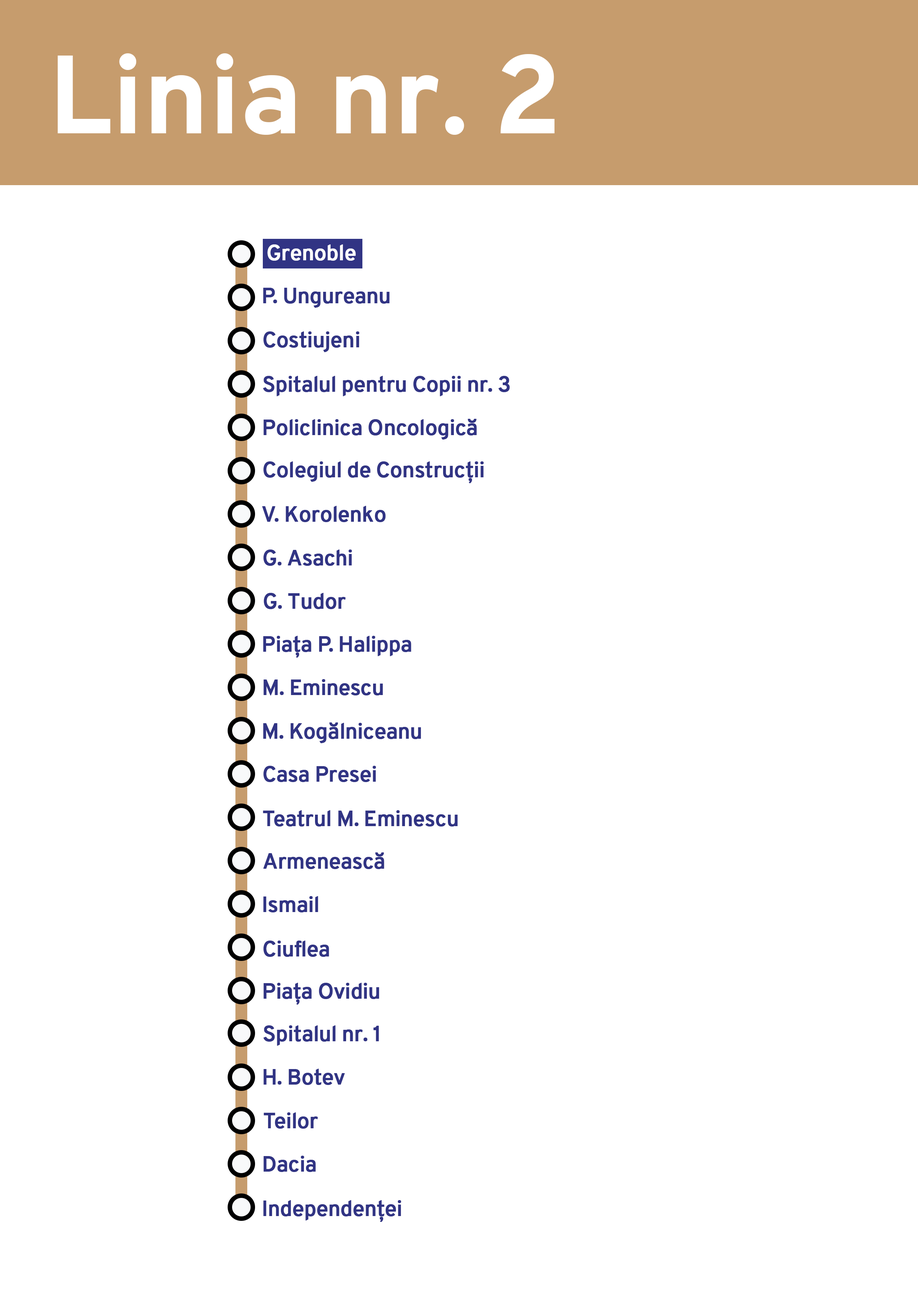
<style>
.page{position:relative;width:918px;height:1299px;background:#ffffff}
.page>*{position:absolute;margin:0}
.t1{font:111.1px "Overpass-Bold";color:#ffffff}
.t2{font:21.6px "Overpass-Reg";letter-spacing:-0.025em;color:#ffffff;font-weight:bold}
.t3{font:21.6px "Overpass-Reg";letter-spacing:-0.025em;color:#313484;font-weight:bold}
</style>
<div class="page">
<p class="t1" style="left:57px;top:53px;width:498px;height:82px">Linia nr. 2</p>
<p class="t2" style="left:267px;top:244px;width:89px;height:17px">Grenoble</p>
<p class="t3" style="left:263px;top:288px;width:127px;height:20px">P. Ungureanu</p>
<p class="t3" style="left:263px;top:331px;width:96px;height:21px">Costiujeni</p>
<p class="t3" style="left:263px;top:376px;width:247px;height:20px">Spitalul pentru Copii nr. 3</p>
<p class="t3" style="left:264px;top:419px;width:213px;height:20px">Policlinica Oncologică</p>
<p class="t3" style="left:263px;top:461px;width:221px;height:22px">Colegiul de Construcții</p>
<p class="t3" style="left:262px;top:506px;width:124px;height:16px">V. Korolenko</p>
<p class="t3" style="left:263px;top:549px;width:89px;height:17px">G. Asachi</p>
<p class="t3" style="left:264px;top:593px;width:82px;height:16px">G. Tudor</p>
<p class="t3" style="left:263px;top:636px;width:148px;height:22px">Piața P. Halippa</p>
<p class="t3" style="left:264px;top:679px;width:119px;height:16px">M. Eminescu</p>
<p class="t3" style="left:263px;top:722px;width:158px;height:21px">M. Kogălniceanu</p>
<p class="t3" style="left:263px;top:766px;width:113px;height:16px">Casa Presei</p>
<p class="t3" style="left:263px;top:810px;width:195px;height:16px">Teatrul M. Eminescu</p>
<p class="t3" style="left:263px;top:852px;width:121px;height:17px">Armenească</p>
<p class="t3" style="left:263px;top:896px;width:55px;height:16px">Ismail</p>
<p class="t3" style="left:263px;top:940px;width:66px;height:17px">Ciuflea</p>
<p class="t3" style="left:264px;top:983px;width:115px;height:21px">Piața Ovidiu</p>
<p class="t3" style="left:263px;top:1025px;width:116px;height:21px">Spitalul nr. 1</p>
<p class="t3" style="left:264px;top:1068px;width:81px;height:17px">H. Botev</p>
<p class="t3" style="left:264px;top:1112px;width:54px;height:16px">Teilor</p>
<p class="t3" style="left:264px;top:1155px;width:52px;height:17px">Dacia</p>
<p class="t3" style="left:263px;top:1200px;width:138px;height:22px">Independenței</p>
</div>
